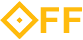
<style>
.page{position:relative;width:83px;height:40px;background:#ffffff}
.page>*{position:absolute;margin:0}
.t1{font:36px "Arial-BoldMT";color:#ffbb0d;scale:1.05 1}
</style>
<div class="page">
<p class="t1" style="left:40px;top:7px;width:42px;height:26px">FF</p>
</div>
